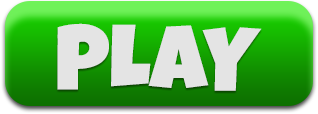
<style>
.page{position:relative;width:318px;height:114px;background:#e4e4e4}
.page>*{position:absolute;margin:0}
.t1{font:91px "LuckiestGuy-Regular";color:#e4e4e4;text-transform:uppercase}
</style>
<div class="page">
<p class="t1" style="left:57px;top:23px;width:205px;height:68px">play</p>
</div>
